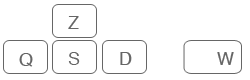
<style>
.page{position:relative;width:250px;height:80px;background:#ffffff}
.page>*{position:absolute;margin:0}
.t1{font:18px "Helvetica";color:#666666}
</style>
<div class="page">
<p class="t1" style="left:68px;top:16px;width:11px;height:13px">Z</p>
<p class="t1" style="left:19px;top:53px;width:14px;height:14px">Q</p>
<p class="t1" style="left:68px;top:52px;width:12px;height:13px">S</p>
<p class="t1" style="left:120px;top:52px;width:12px;height:13px">D</p>
<p class="t1" style="left:217px;top:52px;width:17px;height:13px">W</p>
</div>
